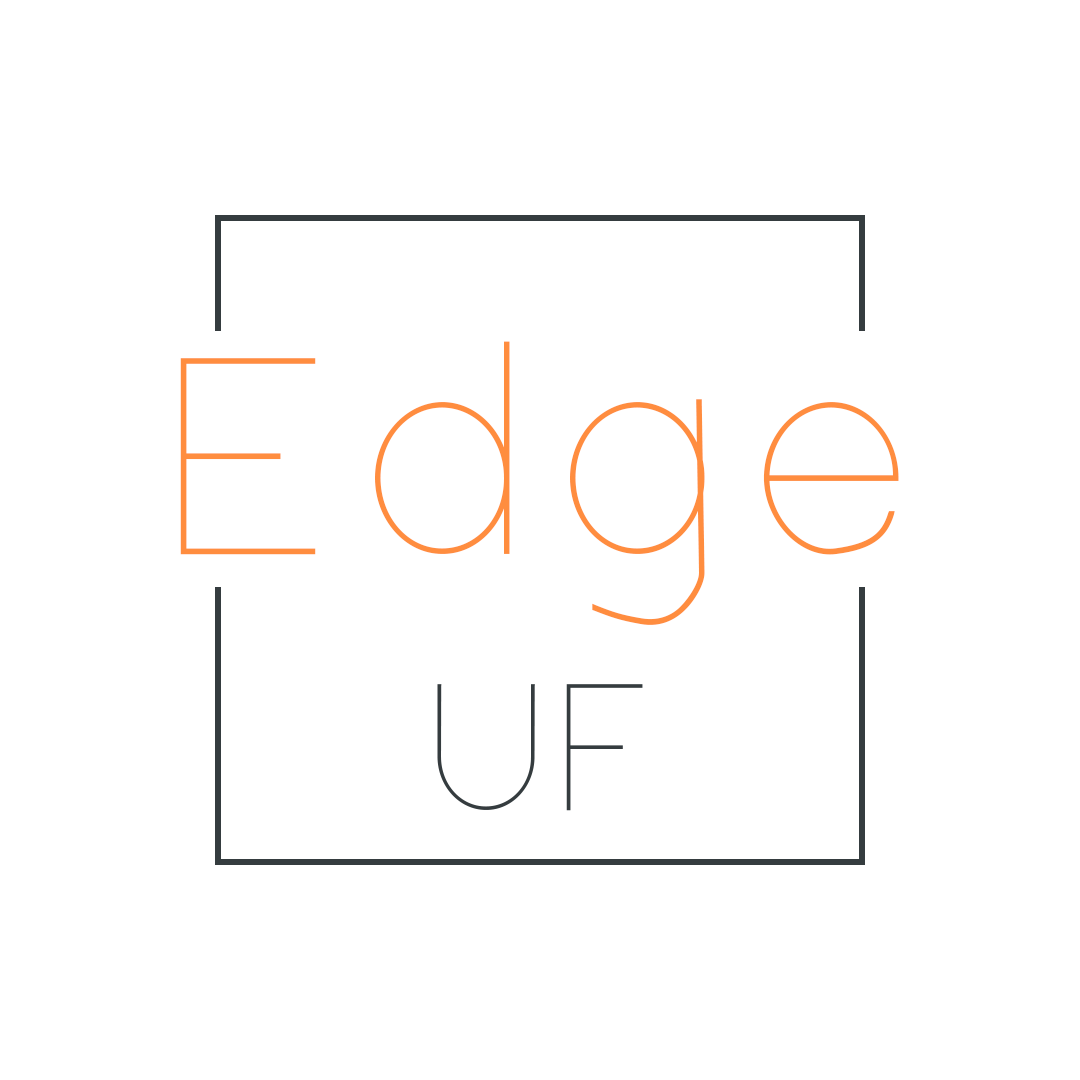
<style>
.page{position:relative;width:1080px;height:1080px;background:#ffffff}
.page>*{position:absolute;margin:0}
.t1{font:280px "NordicaHairline";letter-spacing:0.1em;color:#ff8d3f}
.t2{font:180px "NordicaHairline";color:#353c3f}
</style>
<div class="page">
<p class="t1" style="left:180px;top:341px;width:719px;height:284px">Edge</p>
<p class="t2" style="left:437px;top:684px;width:206px;height:127px">UF</p>
</div>
